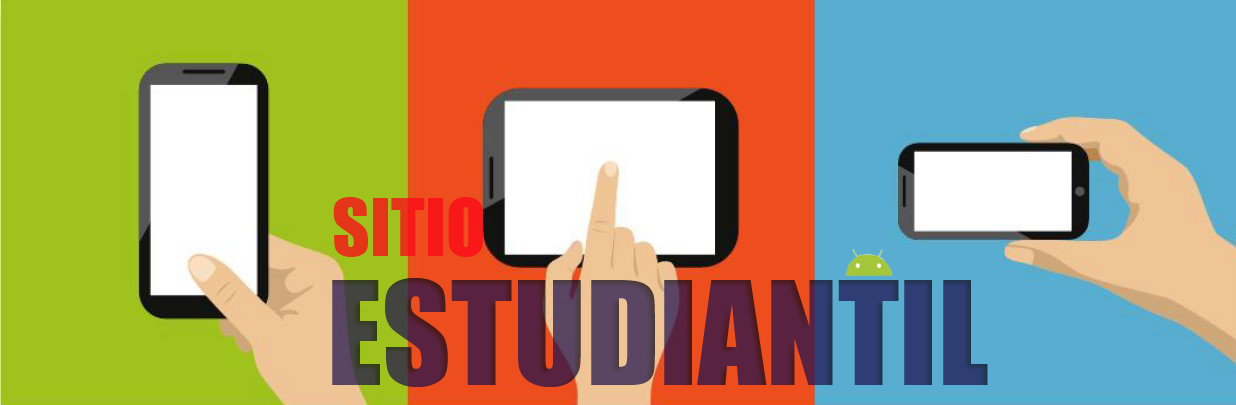
<style>
.page{position:relative;width:1236px;height:405px}
.page>*{position:absolute;margin:0}
.t1{font:73.3px "Impact"}
.t2{font:133.3px "Impact"}
</style>
<div class="page">
<p class="t1" style="left:333px;top:197px;width:151px;height:60px">SITIO</p>
<p class="t2" style="left:332px;top:278px;width:656px;height:109px">ESTUDIANTIL</p>
</div>
